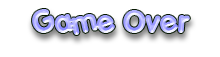
<style>
.page{position:relative;width:220px;height:57px;background:#ffffff}
.page>*{position:absolute;margin:0}
.t1{font:30px "Porkys"}
</style>
<div class="page">
<p class="t1" style="left:32px;top:9px;width:158px;height:26px">Game Over</p>
</div>
